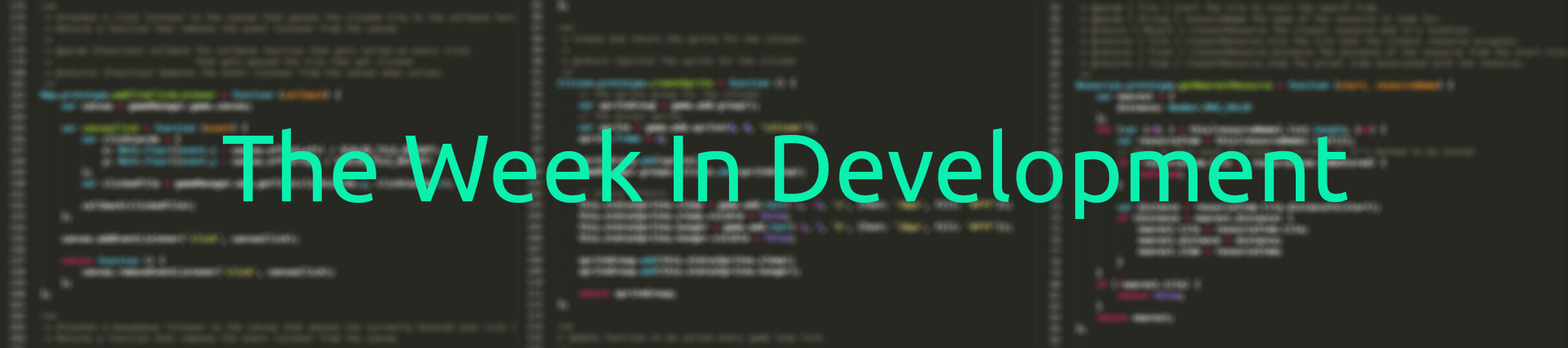
<style>
.page{position:relative;width:1568px;height:348px;background:#272822}
.page>*{position:absolute;margin:0}
.t1{font:94.4px "Ubuntu";color:#0af0af}
</style>
<div class="page">
<p class="t1" style="left:223px;top:128px;width:1125px;height:91px">The Week In Development</p>
</div>
